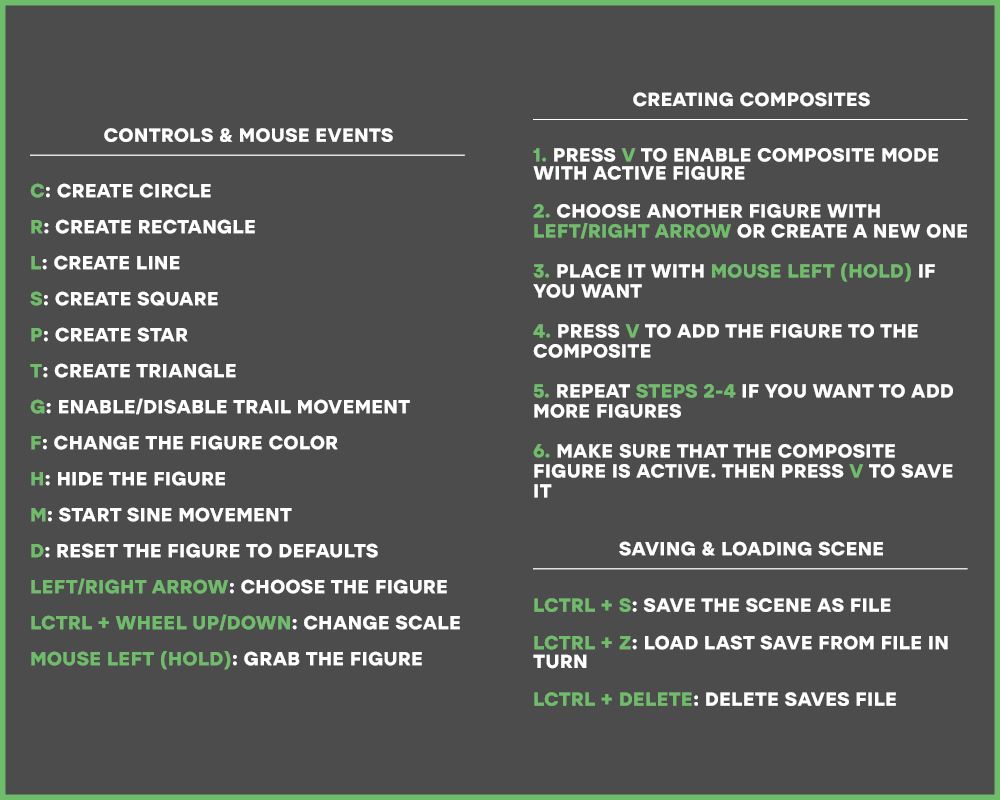
<style>
.page{position:relative;width:1000px;height:800px;background:#4c4c4c}
.page>*{position:absolute;margin:0}
.t1{font:18.8px/20px "ICTV-Bold";color:#ffffff;text-transform:uppercase}
.t2{font:18.8px/18.8px "ICTV-Bold";color:#ffffff;text-transform:uppercase}
.t3{font:18.8px/18px "ICTV-Bold";color:#6fbd6a;text-transform:uppercase}
.t4{font:18.8px/18px "ICTV-Bold";color:#ffffff;text-transform:uppercase}
.t5{font:18.8px/20px "ICTV-Bold";color:#6fbd6a;text-transform:uppercase}
.t6{font:18.8px/18.8px "ICTV-Bold";color:#6fbd6a;text-transform:uppercase}
</style>
<div class="page">
<p class="t1" style="left:533px;top:92px;width:435px;height:614px;text-align:center"><span class="t2">Creating composites<br>            <br><br></span><span class="t3">1. </span><span class="t4">Press </span><span class="t3">v </span><span class="t4">to enable composite mode with active figure<br><br></span><span class="t5">2.</span> Choose another figure with <span class="t5">Left/right arrow</span> or create a new one<br><br><span class="t5">3.</span> Place it with <span class="t5">Mouse left (hold)</span> if you want<br><br><span class="t5">4.</span> Press <span class="t5">v</span> to add the figure to the composite<br><br><span class="t5">5.</span> Repeat <span class="t5">steps 2-4 </span>if you want to add more figures<br><br><span class="t5">6. </span>Make sure that the composite figure is active. then press <span class="t5">v</span> to save it<br><br><span class="t2"><br>Saving &amp; loading scene<br>            <br><br></span><span class="t6">LCTRL + S</span><span class="t2">: Save the scene as file<br><br></span><span class="t6">LCTRL + Z</span><span class="t2">: Load last save from file in turn<br><br></span><span class="t6">LCTRL + DELETE</span><span class="t2">: Delete saves file</span></p>
<p class="t4" style="left:30px;top:128px;width:435px;height:542px;text-align:center"><span class="t2">Controls &amp; mouse events<br>            <br><br></span><span class="t3">c</span>: create circle<br><br><span class="t3">R</span>: Create rectangle<br><br><span class="t3">L</span>: Create line<br><br><span class="t3">S</span>: Create square<br><br><span class="t3">P</span>: Create star<br><br><span class="t3">T</span>: Create Triangle<br><br><span class="t3">G</span>: Enable/disable trail movement<br><br><span class="t3">F</span>: Change the figure color<br><br><span class="t3">H</span>: Hide the figure<br><br><span class="t3">M</span>: Start sine movement<br><br><span class="t3">D</span>: reset the figure to defaults<br><br><span class="t3">Left/right arrow</span>: choose the figure<br><br><span class="t3">LCTRL + Wheel up/down</span>: Change scale<br><br><span class="t3">Mouse left (Hold)</span>: Grab the figure</p>
</div>
